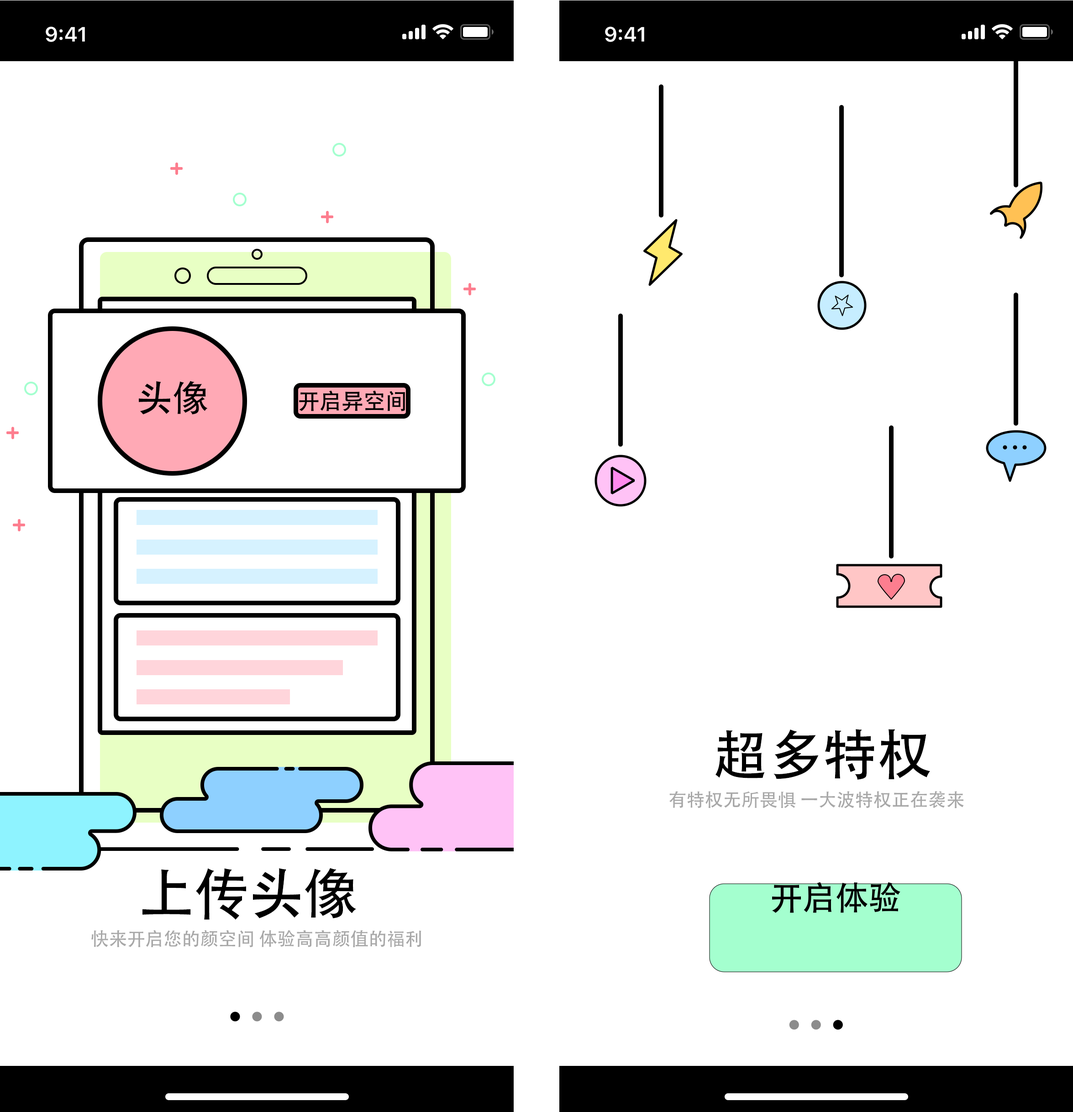
<style>
.page{position:relative;width:1073px;height:1112px;background:#ffffff}
.page>*{position:absolute;margin:0}
.t1{font:36.5px "AdobeHeitiStd-Regular";color:#000000}
.t2{font:54.8px "AdobeHeitiStd-Regular";color:#000000}
.t3{font:18.3px "AdobeHeitiStd-Regular";color:#a8a8a8}
</style>
<div class="page">
<p class="t1" style="left:139px;top:381px;width:69px;height:33px">头像</p>
<p class="t2" style="left:715px;top:729px;width:215px;height:51px">超多特权</p>
<p class="t3" style="left:669px;top:791px;width:294px;height:17px">有特权无所畏惧 一大波特权正在袭来</p>
<p class="t2" style="left:142px;top:868px;width:214px;height:52px">上传头像tou’xian头像</p>
<p class="t3" style="left:91px;top:930px;width:330px;height:17px">快来开启您的颜空间 体验高高颜值的福利</p>
</div>
